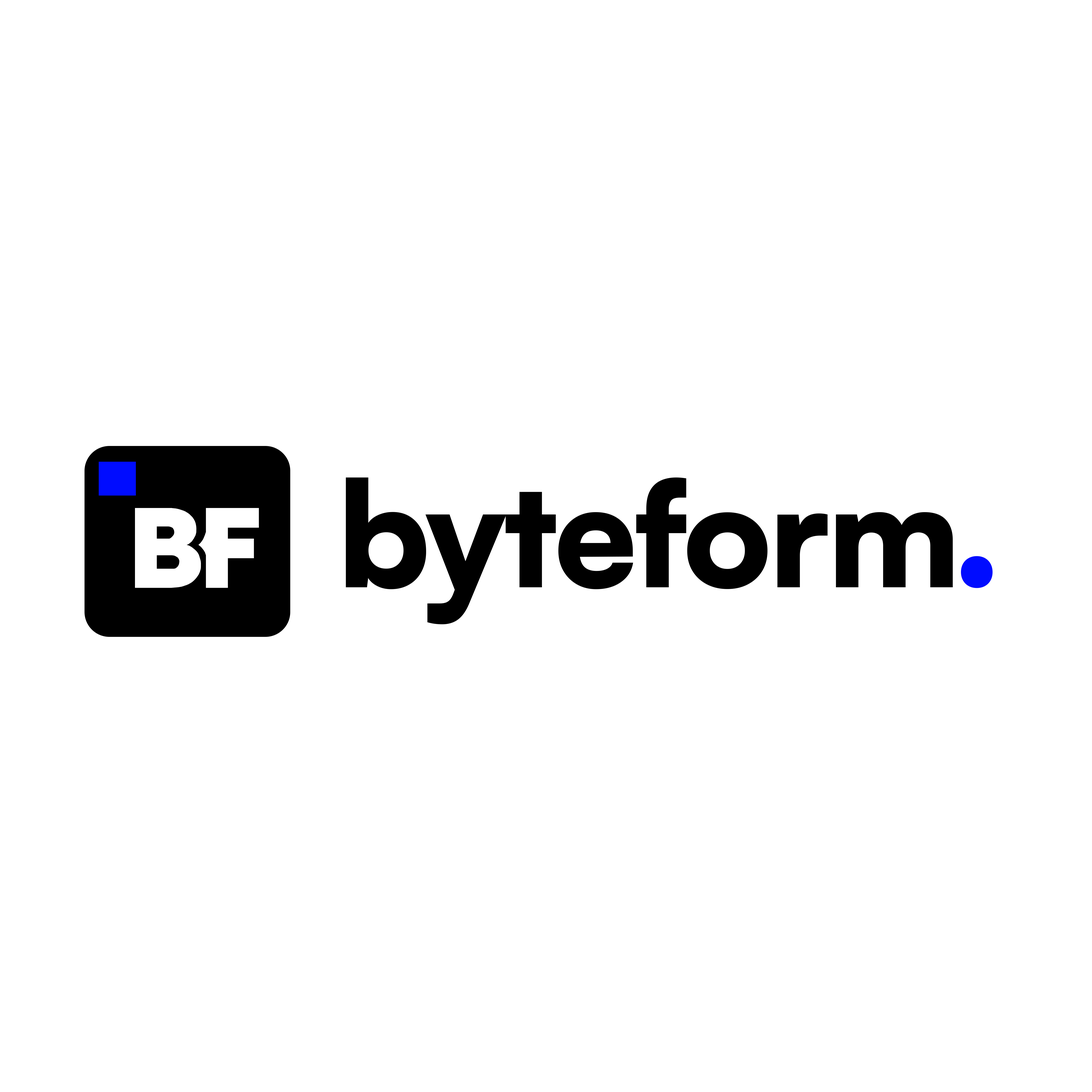
<style>
.page{position:relative;width:1092px;height:1092px;background:#ffffff}
.page>*{position:absolute;margin:0}
.t1{font:145.6px "SatoshiVariable-Bold";letter-spacing:-0.02em;color:#000000}
.t2{font:145.6px "GeneralSans-Bold";letter-spacing:-0.02em;color:#000cff}
</style>
<div class="page">
<p class="t1" style="left:346px;top:477px;width:647px;height:147px">byteform<span class="t2">.</span></p>
</div>
